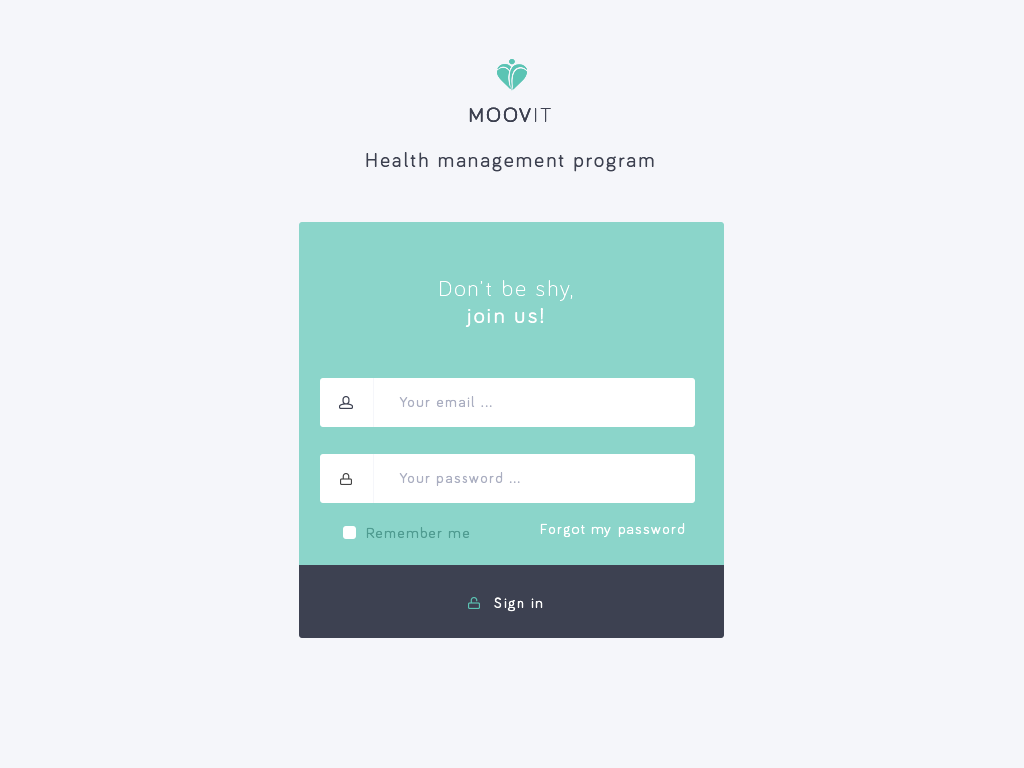
<style>
.page{position:relative;width:1024px;height:768px;background:#f5f6fa}
.page>*{position:absolute;margin:0}
.t1{font:20.6px "Bariol-Regular";letter-spacing:0.1em;color:#3d4151}
.t2{font:20.6px "Bariol-Light";letter-spacing:0.1em;color:#3d4151}
.t3{font:22.5px "Bariol-Light";letter-spacing:0.1em;color:#ffffff}
.t4{font:22.5px "Bariol-Regular";letter-spacing:0.1em;color:#ffffff}
.t5{font:15px "Bariol-Regular";letter-spacing:0.1em;color:#aaaec1}
.t6{font:15px "Bariol-Regular";letter-spacing:0.1em;color:#4f9c91}
.t7{font:15px "Bariol-Regular";letter-spacing:0.1em;color:#ffffff}
</style>
<div class="page">
<p class="t1" style="left:469px;top:107px;width:82px;height:15px">MOOV<span class="t2">IT</span></p>
<p class="t1" style="left:469px;top:107px;width:82px;height:15px">MOOV<span class="t2">IT</span></p>
<p class="t1" style="left:366px;top:152px;width:288px;height:20px">Health management program</p>
<p class="t3" style="left:440px;top:280px;width:133px;height:47px;text-align:center">Don’t be shy,<br><span class="t4">join us!</span></p>
<p class="t5" style="left:399px;top:396px;width:93px;height:11px">Your email ...</p>
<p class="t5" style="left:399px;top:472px;width:121px;height:14px">Your password ...</p>
<p class="t6" style="left:366px;top:527px;width:104px;height:11px">Remember me</p>
<p class="t7" style="left:540px;top:523px;width:145px;height:15px">Forgot my password</p>
<p class="t7" style="left:494px;top:597px;width:49px;height:15px">Sign in</p>
</div>
